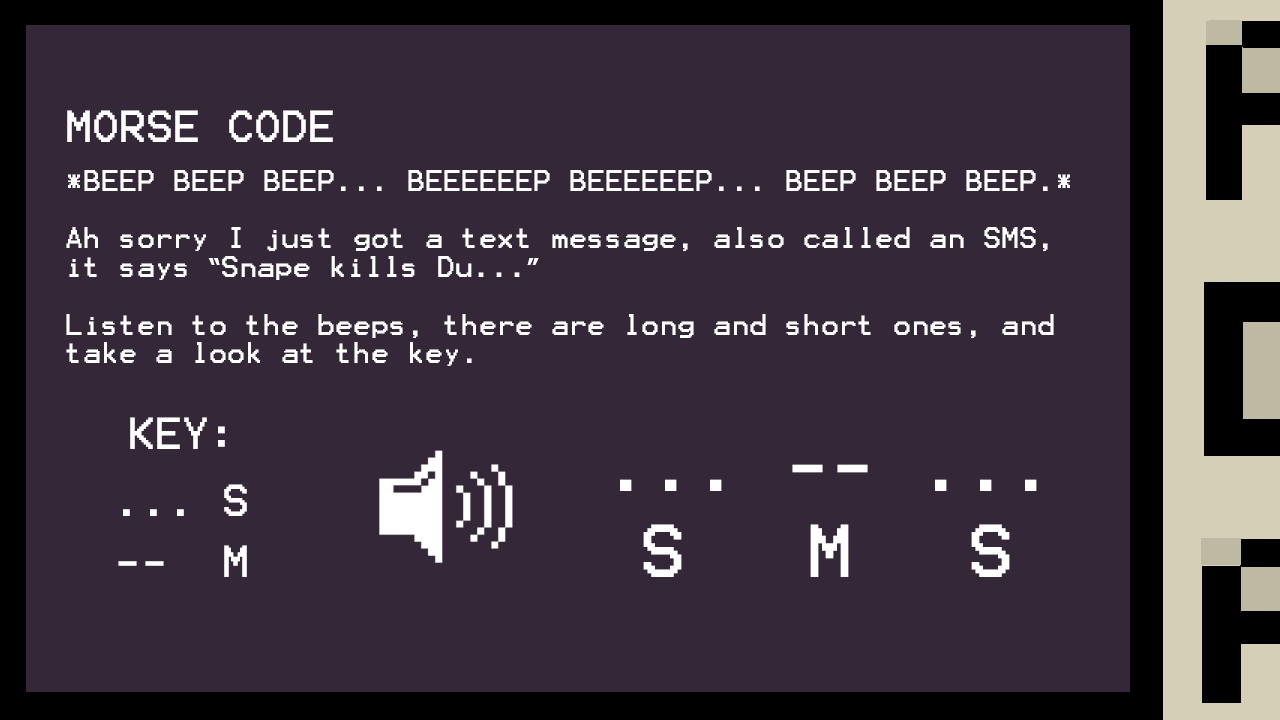
<style>
.page{position:relative;width:1280px;height:720px;background:#342838}
.page>*{position:absolute;margin:0}
.t1{font:36px "Terminal";color:#ffffff}
.t2{font:24px "Terminal";color:#ffffff}
.t3{font:24px "Tahoma-Bold";color:#ffffff}
.t4{font:60px "Terminal";color:#ffffff}
</style>
<div class="page">
<p class="t1" style="left:67px;top:110px;width:266px;height:32px">MORSE CODE</p>
<p class="t2" style="left:66px;top:170px;width:1004px;height:196px">*BEEP BEEP BEEP... BEEEEEEP BEEEEEEP... BEEP BEEP BEEP.*<br><br>Ah sorry I just got a text message, also called an SMS, it says <span class="t3">“</span>Snape kills Du...<span class="t3">”<br><br></span>Listen to the beeps, there are long and short ones, and take a look at the key.</p>
<p class="t1" style="left:130px;top:417px;width:95px;height:32px">KEY:</p>
<p class="t4" style="left:620px;top:464px;width:417px;height:27px">... -- ...</p>
<p class="t1" style="left:123px;top:484px;width:124px;height:32px">... S</p>
<p class="t4" style="left:643px;top:524px;width:39px;height:53px">S</p>
<p class="t4" style="left:810px;top:524px;width:39px;height:53px">M</p>
<p class="t4" style="left:971px;top:524px;width:39px;height:53px">S</p>
<p class="t1" style="left:118px;top:545px;width:129px;height:32px">--  M</p>
</div>
